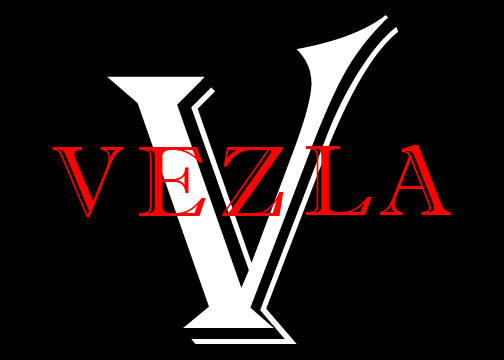
<style>
.page{position:relative;width:504px;height:360px;background:#000000}
.page>*{position:absolute;margin:0}
.t1{font:400px "Algerian";color:#ffffff}
.t2{font:100px "ImprintMT-Shadow";color:#ff0000}
</style>
<div class="page">
<p class="t1" style="left:107px;top:15px;width:292px;height:329px">V</p>
<p class="t2" style="left:52px;top:147px;width:72px;height:70px">V</p>
<p class="t2" style="left:139px;top:147px;width:67px;height:69px">E</p>
<p class="t2" style="left:222px;top:147px;width:62px;height:69px">Z</p>
<p class="t2" style="left:305px;top:146px;width:67px;height:69px">L</p>
<p class="t2" style="left:379px;top:145px;width:72px;height:70px">A</p>
</div>
